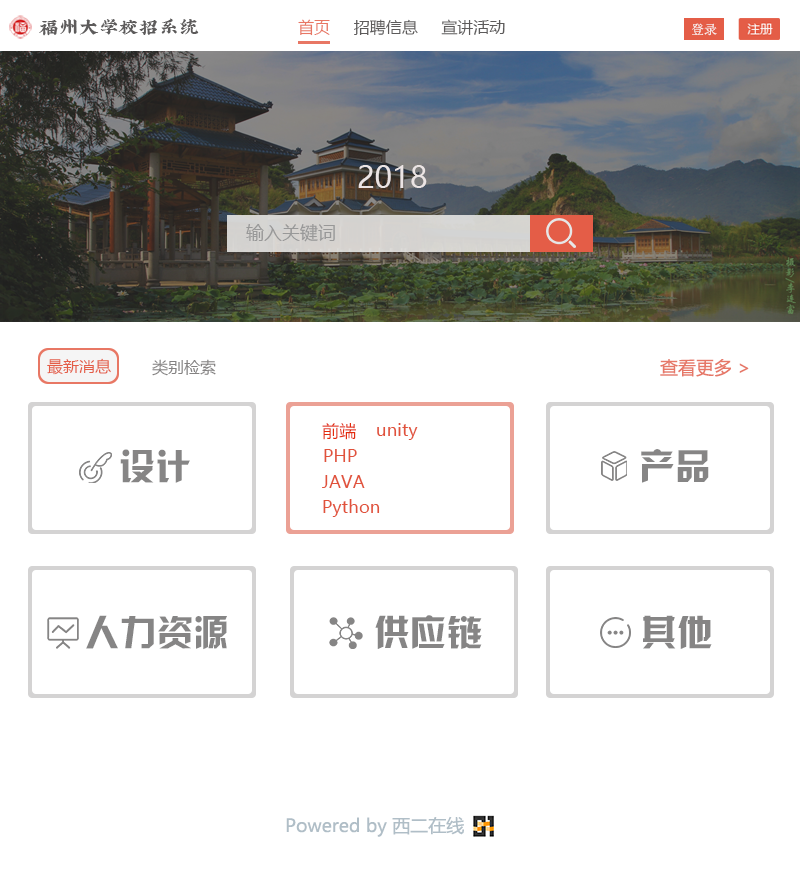
<style>
.page{position:relative;width:800px;height:888px;background:#ffffff}
.page>*{position:absolute;margin:0}
.t1{font:20px "XiQuezhaopaiti-Regular";color:#5d5b5b}
.t2{font:16px "MicrosoftYaHei";color:#5d5b5b}
.t3{font:16px "MicrosoftYaHei";color:#e87764}
.t4{font:30px "MicrosoftYaHeiUI";color:#ebe4e4}
.t5{font:18px "MicrosoftYaHei";color:#989898}
.t6{font:16px "MicrosoftYaHeiUI";color:#e45d47}
.t7{font:16px "MicrosoftYaHeiUI";color:#848282}
.t8{font:18px "MicrosoftYaHei";color:#e67868}
.t9{font:17px "MicrosoftYaHei";letter-spacing:0.01em;color:#e32b0c}
.t10{font:17px "MicrosoftYaHei";letter-spacing:0.01em;color:#e1523b}
.t11{font:36px "HYk2gj";letter-spacing:0.01em;color:#868585}
.t12{font:18px "MicrosoftYaHei";color:#b0bec7}
</style>
<div class="page">
<p class="t1" style="left:39px;top:18px;width:160px;height:18px">福州大学校招系统</p>
<p class="t2" style="left:298px;top:19px;width:207px;height:17px"><span class="t3">首页</span>     招聘信息     宣讲活动</p>
<p class="t4" style="left:358px;top:165px;width:69px;height:23px">2018</p>
<p class="t5" style="left:246px;top:224px;width:89px;height:18px">输入关键词</p>
<p class="t6" style="left:47px;top:358px;width:64px;height:17px">最新消息</p>
<p class="t7" style="left:152px;top:359px;width:64px;height:17px">类别检索</p>
<p class="t8" style="left:660px;top:359px;width:89px;height:18px">查看更多 &gt;</p>
<p class="t9" style="left:322px;top:423px;width:34px;height:17px">前端</p>
<p class="t10" style="left:377px;top:423px;width:41px;height:17px">unity</p>
<p class="t11" style="left:120px;top:449px;width:70px;height:34px">设计</p>
<p class="t10" style="left:324px;top:449px;width:33px;height:13px">PHP</p>
<p class="t11" style="left:641px;top:449px;width:68px;height:34px">产品</p>
<p class="t10" style="left:322px;top:475px;width:43px;height:13px">JAVA</p>
<p class="t10" style="left:323px;top:499px;width:57px;height:18px">Python</p>
<p class="t11" style="left:86px;top:615px;width:141px;height:35px">人力资源</p>
<p class="t11" style="left:375px;top:615px;width:107px;height:34px">供应链</p>
<p class="t11" style="left:643px;top:615px;width:69px;height:34px">其他</p>
<p class="t12" style="left:286px;top:816px;width:178px;height:21px">Powered by 西二在线</p>
</div>
